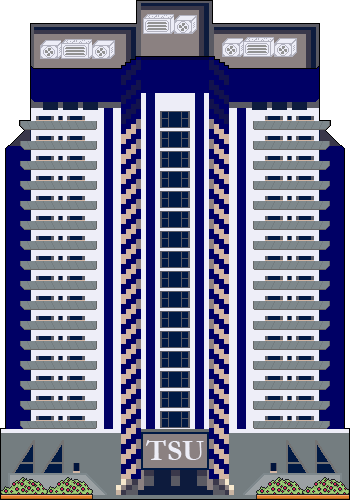
<style>
.page{position:relative;width:350px;height:500px;background:#000065}
.page>*{position:absolute;margin:0}
.t1{font:30px "Garamond-Bold";color:#ededf7}
</style>
<div class="page">
<p class="t1" style="left:146px;top:440px;width:58px;height:20px">TSU</p>
</div>
